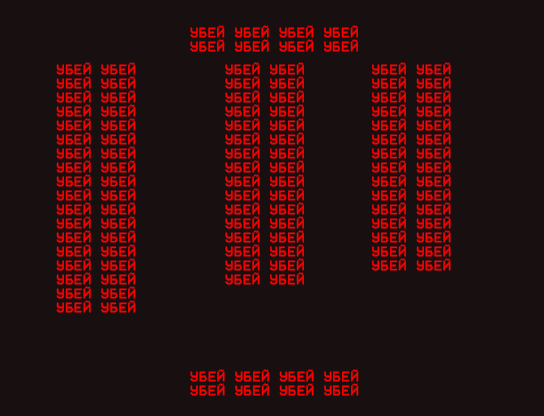
<style>
.page{position:relative;width:544px;height:416px;background:#181010}
.page>*{position:absolute;margin:0}
.t1{font:14px/14px "VCROSDMono";letter-spacing:0.05em;color:#ff0000}
</style>
<div class="page">
<p class="t1" style="left:190px;top:25px;width:168px;height:27px">УБЕЙ УБЕЙ УБЕЙ УБЕЙ<br>УБЕЙ УБЕЙ УБЕЙ УБЕЙ</p>
<p class="t1" style="left:56px;top:62px;width:80px;height:251px">УБЕЙ УБЕЙ<br>УБЕЙ УБЕЙ<br>УБЕЙ УБЕЙ<br>УБЕЙ УБЕЙ<br>УБЕЙ УБЕЙ<br>УБЕЙ УБЕЙ<br>УБЕЙ УБЕЙ<br>УБЕЙ УБЕЙ<br>УБЕЙ УБЕЙ<br>УБЕЙ УБЕЙ<br>УБЕЙ УБЕЙ<br>УБЕЙ УБЕЙ<br>УБЕЙ УБЕЙ<br>УБЕЙ УБЕЙ<br>УБЕЙ УБЕЙ<br>УБЕЙ УБЕЙ<br>УБЕЙ УБЕЙ<br>УБЕЙ УБЕЙ</p>
<p class="t1" style="left:225px;top:62px;width:79px;height:223px">УБЕЙ УБЕЙ<br>УБЕЙ УБЕЙ<br>УБЕЙ УБЕЙ<br>УБЕЙ УБЕЙ<br>УБЕЙ УБЕЙ<br>УБЕЙ УБЕЙ<br>УБЕЙ УБЕЙ<br>УБЕЙ УБЕЙ<br>УБЕЙ УБЕЙ<br>УБЕЙ УБЕЙ<br>УБЕЙ УБЕЙ<br>УБЕЙ УБЕЙ<br>УБЕЙ УБЕЙ<br>УБЕЙ УБЕЙ<br>УБЕЙ УБЕЙ<br>УБЕЙ УБЕЙ</p>
<p class="t1" style="left:372px;top:62px;width:79px;height:209px">УБЕЙ УБЕЙ<br>УБЕЙ УБЕЙ<br>УБЕЙ УБЕЙ<br>УБЕЙ УБЕЙ<br>УБЕЙ УБЕЙ<br>УБЕЙ УБЕЙ<br>УБЕЙ УБЕЙ<br>УБЕЙ УБЕЙ<br>УБЕЙ УБЕЙ<br>УБЕЙ УБЕЙ<br>УБЕЙ УБЕЙ<br>УБЕЙ УБЕЙ<br>УБЕЙ УБЕЙ<br>УБЕЙ УБЕЙ<br>УБЕЙ УБЕЙ</p>
<p class="t1" style="left:190px;top:369px;width:169px;height:27px">УБЕЙ УБЕЙ УБЕЙ УБЕЙ<br>УБЕЙ УБЕЙ УБЕЙ УБЕЙ</p>
</div>
